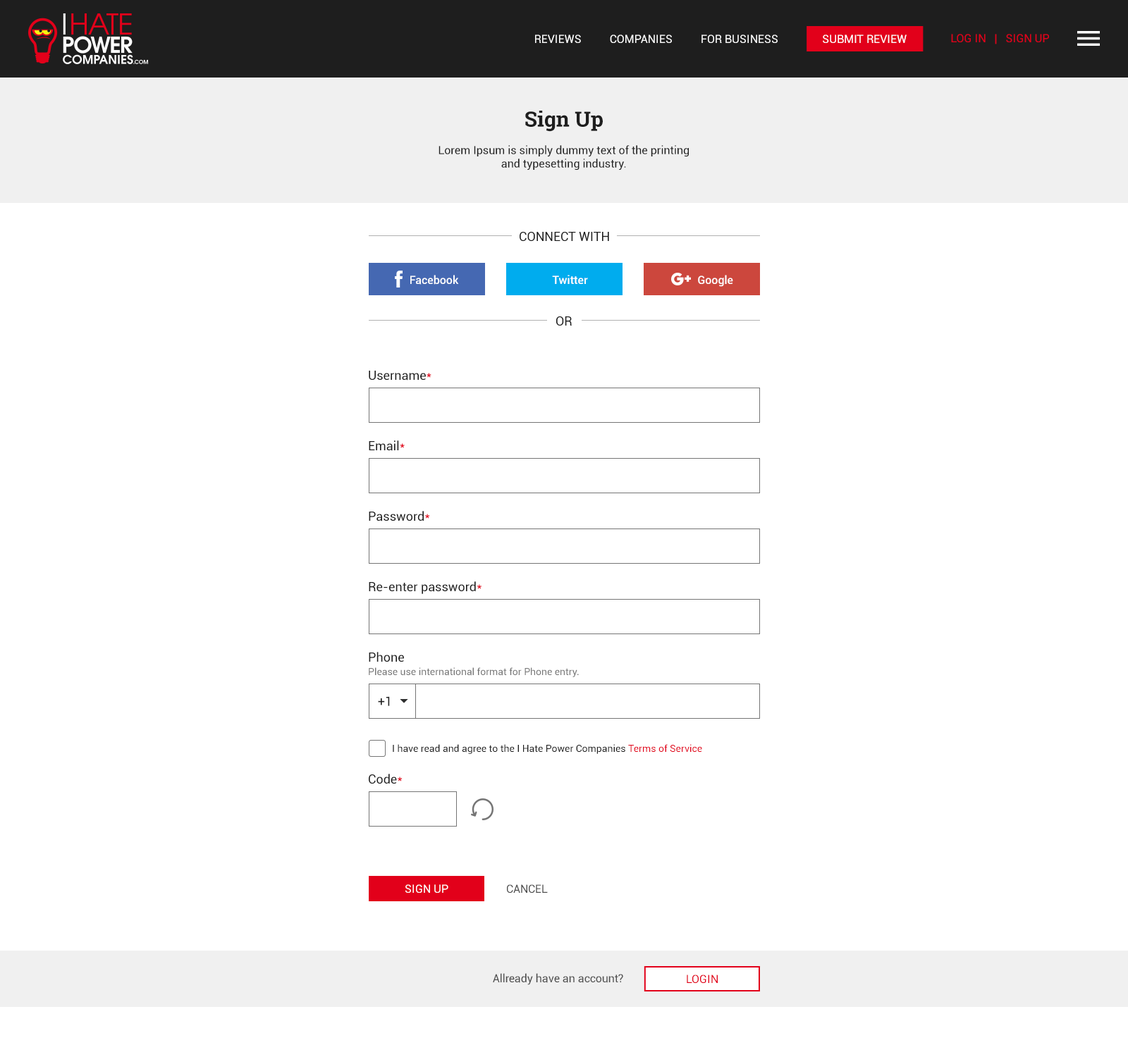
<style>
.page{position:relative;width:1128px;height:1057px;background:#ffffff}
.page>*{position:absolute;margin:0}
.t1{font:11.3px "Roboto-Regular";color:#ffffff;text-transform:uppercase}
.t2{font:11.3px "Roboto-Regular";color:#e2001a;text-transform:uppercase}
.t3{font:21.1px "RobotoSlab-Bold";color:#1e1e1e}
.t4{font:11.3px "Roboto-Regular";color:#1e1e1e}
.t5{font:12.7px "Roboto-Regular";color:#1e1e1e;text-transform:uppercase}
.t6{font:11.3px "Roboto-Medium";color:#ffffff}
.t7{font:12.7px "Roboto-Regular";color:#1e1e1e}
.t8{font:12.7px "Roboto-Regular";color:#e2001a}
.t9{font:9.9px "Roboto-Regular";color:#757575}
.t10{font:9.9px "Roboto-Regular";color:#1e1e1e}
.t11{font:9.9px "Roboto-Regular";color:#e2001a}
.t12{font:11.3px "Roboto-Regular";color:#4d4d4d;text-transform:uppercase}
.t13{font:11.3px "Roboto-Regular";color:#4d4d4d}
</style>
<div class="page">
<p class="t1" style="left:535px;top:35px;width:242px;height:8px">Reviews          Companies          For Business</p>
<p class="t1" style="left:823px;top:35px;width:83px;height:8px">submit review</p>
<p class="t2" style="left:951px;top:34px;width:98px;height:10px">Log in   |   Sign up</p>
<p class="t3" style="left:525px;top:111px;width:78px;height:21px">Sign Up</p>
<p class="t4" style="left:438px;top:145px;width:251px;height:25px;text-align:center">Lorem Ipsum is simply dummy text of the printing<br>and typesetting industry.</p>
<p class="t5" style="left:519px;top:232px;width:90px;height:9px">Connect with</p>
<p class="t6" style="left:410px;top:275px;width:49px;height:10px">Facebook</p>
<p class="t6" style="left:552px;top:275px;width:36px;height:9px">Twitter</p>
<p class="t6" style="left:698px;top:275px;width:35px;height:12px">Google</p>
<p class="t5" style="left:556px;top:316px;width:16px;height:10px">OR</p>
<p class="t7" style="left:369px;top:371px;width:62px;height:10px">Username<span class="t8">*</span></p>
<p class="t7" style="left:369px;top:441px;width:36px;height:10px">Email<span class="t8">*</span></p>
<p class="t7" style="left:369px;top:511px;width:61px;height:11px">Password<span class="t8">*</span></p>
<p class="t7" style="left:369px;top:582px;width:112px;height:12px">Re-enter password<span class="t8">*</span></p>
<p class="t7" style="left:369px;top:652px;width:35px;height:10px">Phone</p>
<p class="t9" style="left:369px;top:668px;width:210px;height:9px">Please use international format for Phone entry.</p>
<p class="t7" style="left:378px;top:696px;width:12px;height:10px">+1</p>
<p class="t10" style="left:393px;top:744px;width:309px;height:10px">I have read and agree to the I Hate Power Companies <span class="t11">Terms of Service</span></p>
<p class="t7" style="left:369px;top:774px;width:33px;height:10px">Code<span class="t8">*</span></p>
<p class="t1" style="left:405px;top:885px;width:43px;height:8px">SIGN UP</p>
<p class="t12" style="left:507px;top:885px;width:41px;height:8px">CANCEL</p>
<p class="t13" style="left:493px;top:973px;width:130px;height:12px">Allready have an account?</p>
<p class="t2" style="left:687px;top:975px;width:31px;height:8px">LOGIN</p>
</div>
